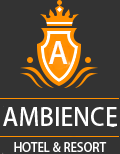
<style>
.page{position:relative;width:120px;height:154px;background:#333333}
.page>*{position:absolute;margin:0}
.t1{font:30px "AdobeFanHeitiStd-Bold";color:#ffffff}
.t2{font:24px "AdobeFanHeitiStd-Bold";color:#ffffff}
.t3{font:12px "AdobeFanHeitiStd-Bold";color:#ffffff}
</style>
<div class="page">
<p class="t1" style="left:49px;top:41px;width:19px;height:23px">A</p>
<p class="t2" style="left:3px;top:107px;width:114px;height:19px">AMBIENCE</p>
<p class="t3" style="left:14px;top:142px;width:93px;height:10px">HOTEL &amp; RESORT</p>
</div>
